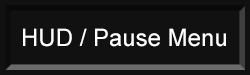
<style>
.page{position:relative;width:250px;height:75px;background:#111111}
.page>*{position:absolute;margin:0}
.t1{font:24px "ArialMT";color:#ffffff}
</style>
<div class="page">
<p class="t1" style="left:23px;top:28px;width:203px;height:19px">HUD / Pause Menu</p>
</div>
